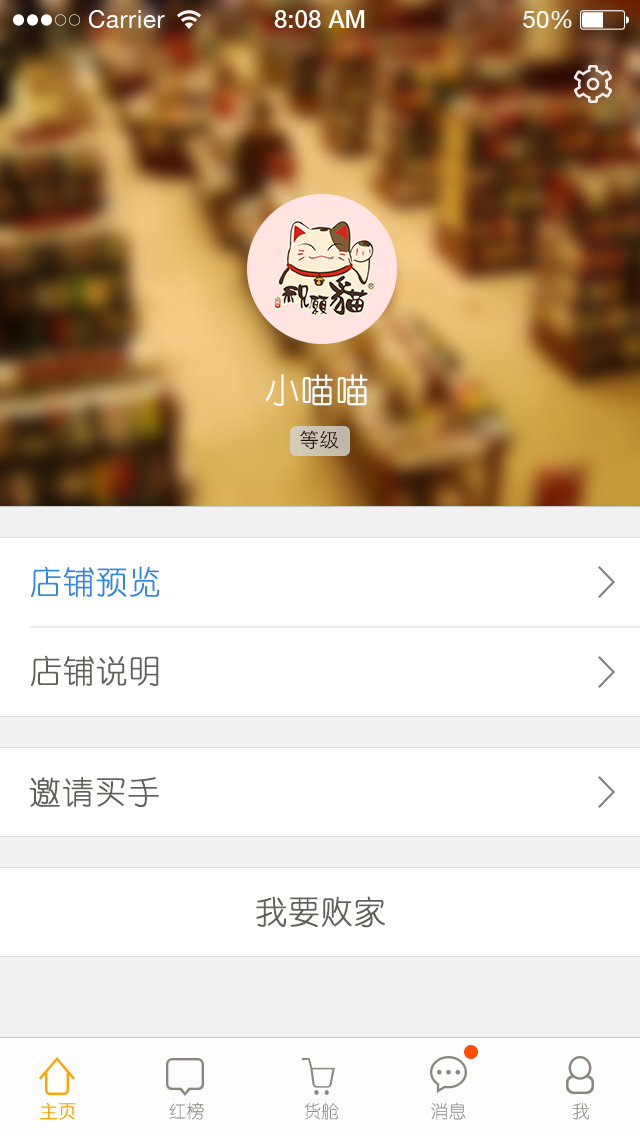
<style>
.page{position:relative;width:640px;height:1136px;background:#ffffff}
.page>*{position:absolute;margin:0}
.t1{font:34px "YouYuan";color:#ffffff;font-weight:bold}
.t2{font:20px "STHeitiSC-Light";color:#1b1100;text-transform:uppercase}
.t3{font:32px "YouYuan";color:#298ae4;font-weight:bold}
.t4{font:32px "YouYuan";color:#625e58;font-weight:bold}
.t5{font:18px "YouYuan";color:#ffa300;font-weight:bold}
.t6{font:18px "YouYuan";color:#8c877e;text-transform:uppercase}
.t7{font:18px "YouYuan";text-transform:uppercase}
</style>
<div class="page">
<p class="t1" style="left:265px;top:374px;width:103px;height:32px">小喵喵</p>
<p class="t2" style="left:300px;top:430px;width:39px;height:19px">等级</p>
<p class="t3" style="left:31px;top:566px;width:129px;height:32px">店铺预览</p>
<p class="t4" style="left:31px;top:655px;width:128px;height:32px">店铺说明</p>
<p class="t4" style="left:29px;top:776px;width:130px;height:32px">邀请买手</p>
<p class="t4" style="left:256px;top:896px;width:129px;height:32px">我要败家</p>
<p class="t5" style="left:40px;top:1102px;width:36px;height:18px">主页</p>
<p class="t6" style="left:169px;top:1102px;width:35px;height:18px">红榜</p>
<p class="t6" style="left:304px;top:1102px;width:35px;height:18px">货舱</p>
<p class="t7" style="left:431px;top:1102px;width:35px;height:18px">消息</p>
<p class="t6" style="left:572px;top:1102px;width:17px;height:18px">我</p>
</div>
